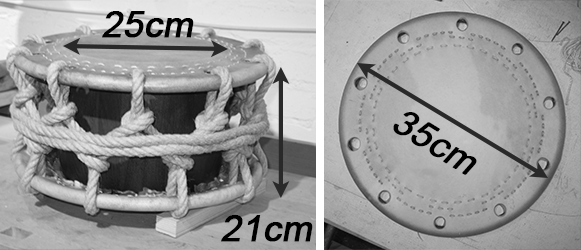
<style>
.page{position:relative;width:581px;height:250px}
.page>*{position:absolute;margin:0}
.t1{font:36px "ArialMT";color:#000000;font-weight:bold;font-style:italic}
</style>
<div class="page">
<p class="t1" style="left:102px;top:11px;width:92px;height:27px">25cm</p>
<p class="t1" style="left:393px;top:112px;width:84px;height:63px;rotate:32deg">35cm</p>
<p class="t1" style="left:221px;top:215px;width:92px;height:27px">21cm</p>
</div>
